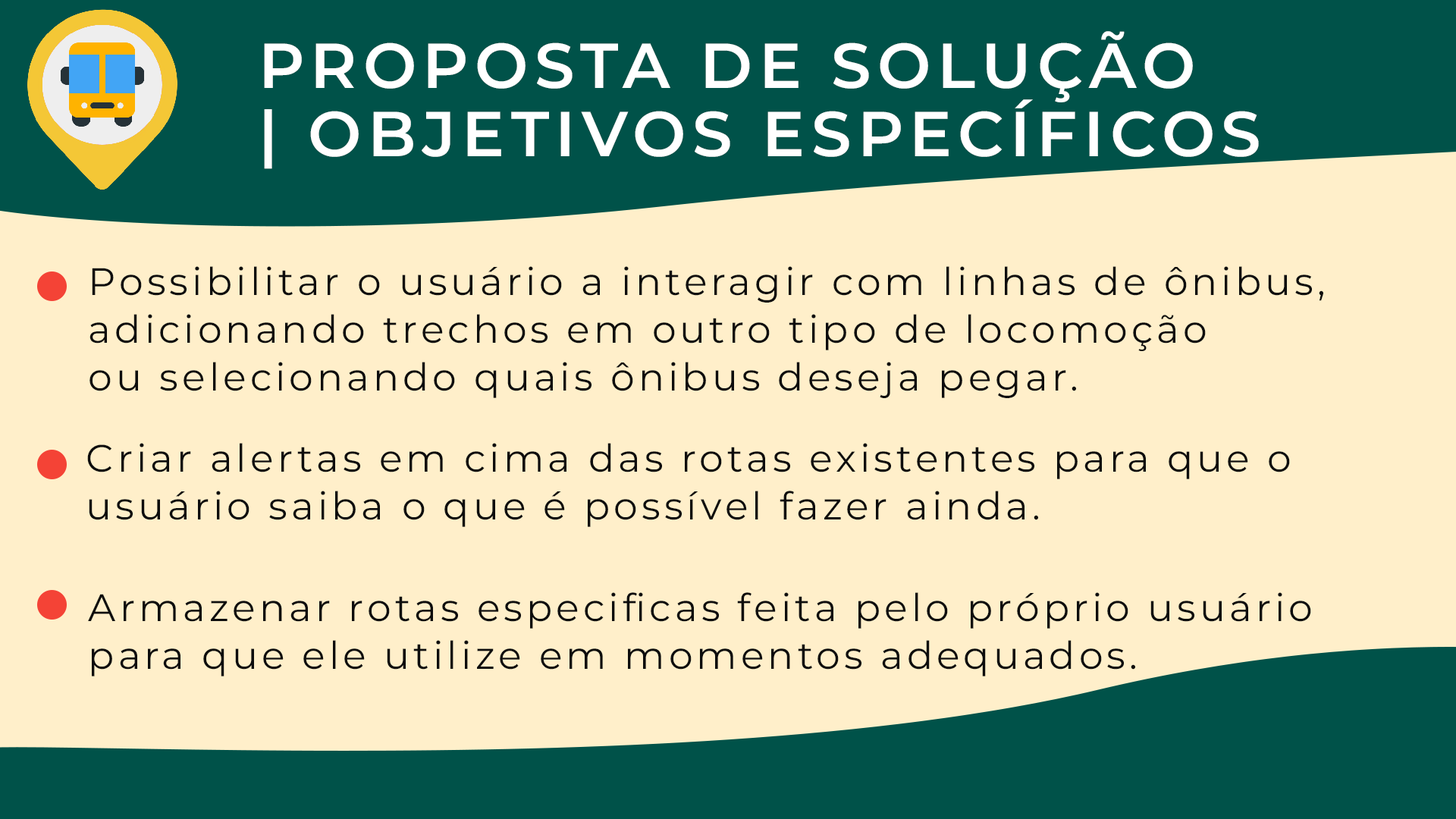
<style>
.page{position:relative;width:1456px;height:819px;background:#ffefca}
.page>*{position:absolute;margin:0}
.t1{font:63.4px/68.3px "MontserratRoman-SemiBold";letter-spacing:0.1em;color:#ffffff}
.t2{font:38.3px/47.6px "MontserratRoman-Regular";letter-spacing:0.1em;color:#0d0d0d}
</style>
<div class="page">
<p class="t1" style="left:264px;top:31px;width:995px;height:138px">PROPOSTA DE SOLUÇÃO<br>| OBJETIVOS ESPECÍFICOS</p>
<p class="t2" style="left:89px;top:266px;width:1234px;height:132px">Possibilitar o usuário a interagir com linhas de ônibus,<br>adicionando trechos em outro tipo de locomoção<br>ou selecionando quais ônibus deseja pegar.</p>
<p class="t2" style="left:87px;top:443px;width:1203px;height:84px">Criar alertas em cima das rotas existentes para que o <br>usuário saiba o que é possível fazer ainda.</p>
<p class="t2" style="left:88px;top:592px;width:1223px;height:84px">Armazenar rotas especificas feita pelo próprio usuário<br>para que ele utilize em momentos adequados.</p>
</div>
